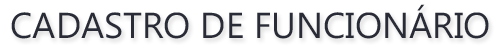
<style>
.page{position:relative;width:500px;height:52px;background:#ffffff}
.page>*{position:absolute;margin:0}
.t1{font:36px "MicrosoftPhagsPa";color:#292c37}
</style>
<div class="page">
<p class="t1" style="left:11px;top:4px;width:478px;height:35px">CADASTRO DE FUNCIONÁRIO</p>
</div>
